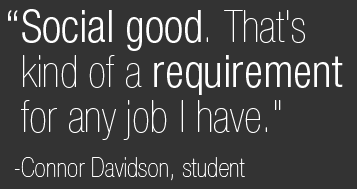
<style>
.page{position:relative;width:357px;height:189px;background:#333333}
.page>*{position:absolute;margin:0}
.t1{font:27.4px/45px "HelveticaNeue-UltraLigCond";color:#ffffff}
.t2{font:44.4px/45px "HelveticaNeue-LightCond";color:#ffffff}
.t3{font:44.4px/45px "HelveticaNeue-UltraLigCond";color:#ffffff}
</style>
<div class="page">
<p class="t1" style="left:8px;top:9px;width:335px;height:172px"><span class="t2">“Social good</span><span class="t3">. That's kind of a </span><span class="t2">requirement </span><span class="t3">for any job I have." <br></span>-Connor Davidson, student</p>
</div>
